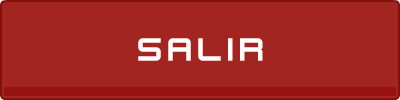
<style>
.page{position:relative;width:400px;height:100px;background:#a32521}
.page>*{position:absolute;margin:0}
.t1{font:36px "KenVector-Future";color:#ffffff}
</style>
<div class="page">
<p class="t1" style="left:138px;top:38px;width:125px;height:23px">salir</p>
</div>
